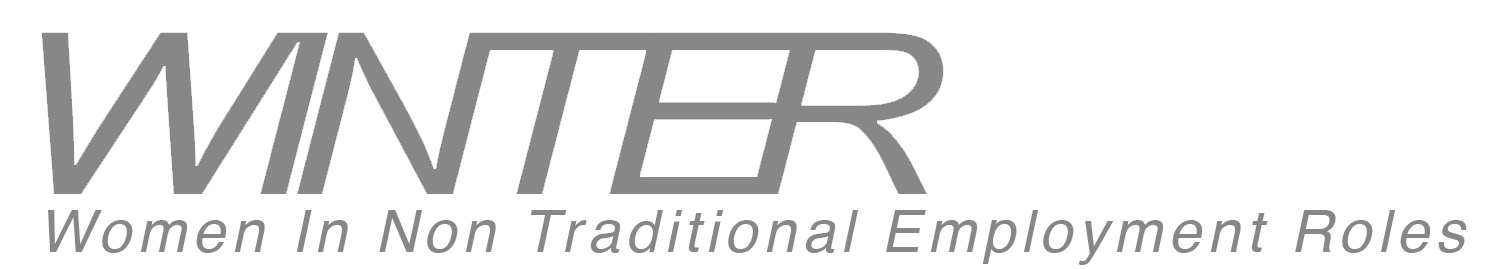
<style>
.page{position:relative;width:1512px;height:269px;background:#ffffff}
.page>*{position:absolute;margin:0}
.t1{font:58.9px "Helvetica-Oblique";letter-spacing:0.1em;color:#878787}
</style>
<div class="page">
<p class="t1" style="left:48px;top:210px;width:1419px;height:55px">Women In Non Traditional Employment Roles</p>
</div>
